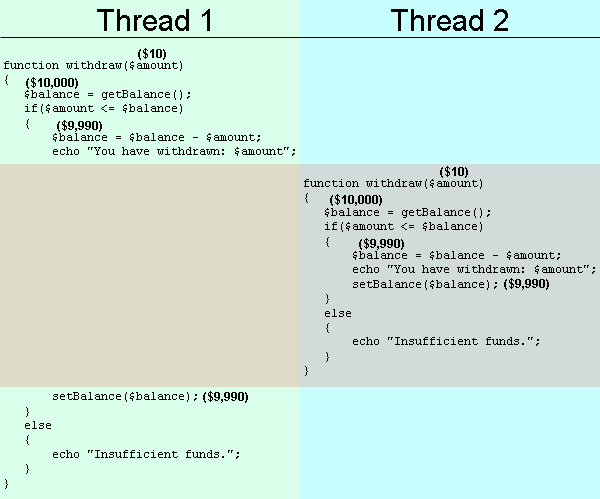
<style>
.page{position:relative;width:600px;height:499px;background:#c8fffe}
.page>*{position:absolute;margin:0}
.t1{font:30px "ArialMT";color:#000000}
.t2{font:12px "Arial-BoldMT";color:#000000}
.t3{font:12px "CourierNewPSMT";color:#000000}
</style>
<div class="page">
<p class="t1" style="left:97px;top:9px;width:113px;height:22px">Thread 1</p>
<p class="t1" style="left:391px;top:9px;width:117px;height:22px">Thread 2</p>
<p class="t2" style="left:138px;top:48px;width:28px;height:12px">($10)</p>
<p class="t3" style="left:4px;top:61px;width:291px;height:428px">function withdraw($amount)<br>{<br>   $balance = getBalance();<br>   if($amount &lt;= $balance)<br>   {<br>       $balance = $balance - $amount;<br>       echo "You have withdrawn: $amount";<br><br><br><br><br><br><br><br><br><br><br><br><br><br><br><br><br>       setBalance($balance);<br>   }<br>   else<br>   {<br>       echo "Insufficient funds.";<br>   }<br>}</p>
<p class="t2" style="left:26px;top:77px;width:52px;height:12px">($10,000)</p>
<p class="t2" style="left:57px;top:120px;width:45px;height:12px">($9,990)</p>
<p class="t2" style="left:440px;top:166px;width:28px;height:12px">($10)</p>
<p class="t3" style="left:304px;top:179px;width:291px;height:197px">function withdraw($amount)<br>{<br>   $balance = getBalance();<br>   if($amount &lt;= $balance)<br>   {<br>       $balance = $balance - $amount;<br>       echo "You have withdrawn: $amount";<br>       setBalance($balance);<br>   }<br>   else<br>   {<br>       echo "Insufficient funds.";<br>   }<br>}</p>
<p class="t2" style="left:330px;top:194px;width:52px;height:12px">($10,000)</p>
<p class="t2" style="left:359px;top:238px;width:45px;height:12px">($9,990)</p>
<p class="t2" style="left:504px;top:278px;width:45px;height:12px">($9,990)</p>
<p class="t2" style="left:203px;top:391px;width:45px;height:12px">($9,990)</p>
</div>
